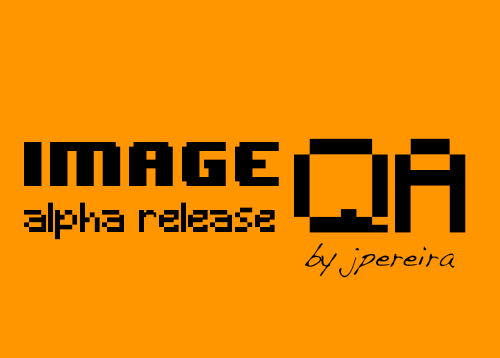
<style>
.page{position:relative;width:500px;height:358px;background:#ff9600}
.page>*{position:absolute;margin:0}
.t1{font:52.7px "8BITWONDERNominal";color:#000000}
.t2{font:124.9px "Minecraft";color:#000000}
.t3{font:39.3px "Minecraft";color:#000000}
.t4{font:29.9px "Handwriting-Dakota";color:#000000}
</style>
<div class="page">
<p class="t1" style="left:24px;top:142px;width:255px;height:44px">image</p>
<p class="t2" style="left:294px;top:138px;width:172px;height:95px">QA</p>
<p class="t3" style="left:24px;top:202px;width:251px;height:38px">alpha release</p>
<p class="t4" style="left:305px;top:243px;width:150px;height:35px">by jpereira</p>
</div>
